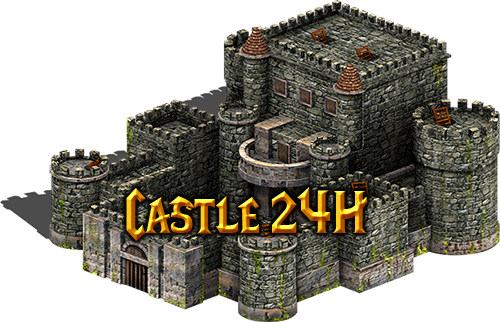
<style>
.page{position:relative;width:500px;height:322px;background:#ffffff}
.page>*{position:absolute;margin:0}
.t1{font:60px "LifeCraft"}
</style>
<div class="page">
<p class="t1" style="left:126px;top:187px;width:242px;height:54px">Castle 24H</p>
</div>
